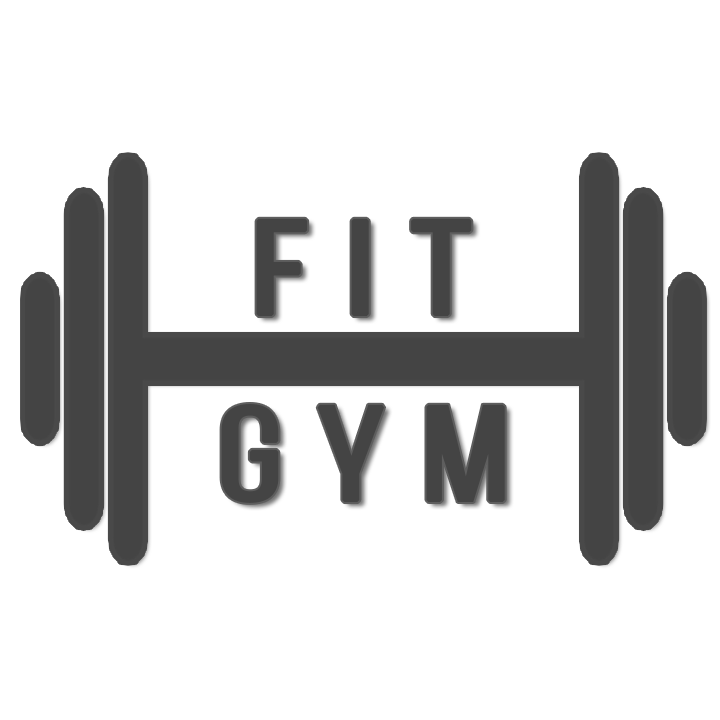
<style>
.page{position:relative;width:720px;height:720px;background:#ffffff}
.page>*{position:absolute;margin:0}
.t1{font:133.3px "BebasNeueRegular";letter-spacing:0.2em;color:#444444;font-weight:bold;scale:1.25 1}
</style>
<div class="page">
<p class="t1" style="left:256px;top:218px;width:216px;height:99px">FIT</p>
<p class="t1" style="left:221px;top:404px;width:284px;height:99px">GYM</p>
</div>
